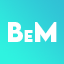
<style>
.page{position:relative;width:64px;height:64px}
.page>*{position:absolute;margin:0}
.t1{font:25px "LEMONMILK-Bold";letter-spacing:0.005em;color:#ffffff}
.t2{font:15px "LEMONMILK-Bold";letter-spacing:0.005em;color:#ffffff}
</style>
<div class="page">
<p class="t1" style="left:8px;top:22px;width:25px;height:20px">B<span class="t2">e</span></p>
<p class="t1" style="left:35px;top:22px;width:22px;height:20px">M</p>
</div>
